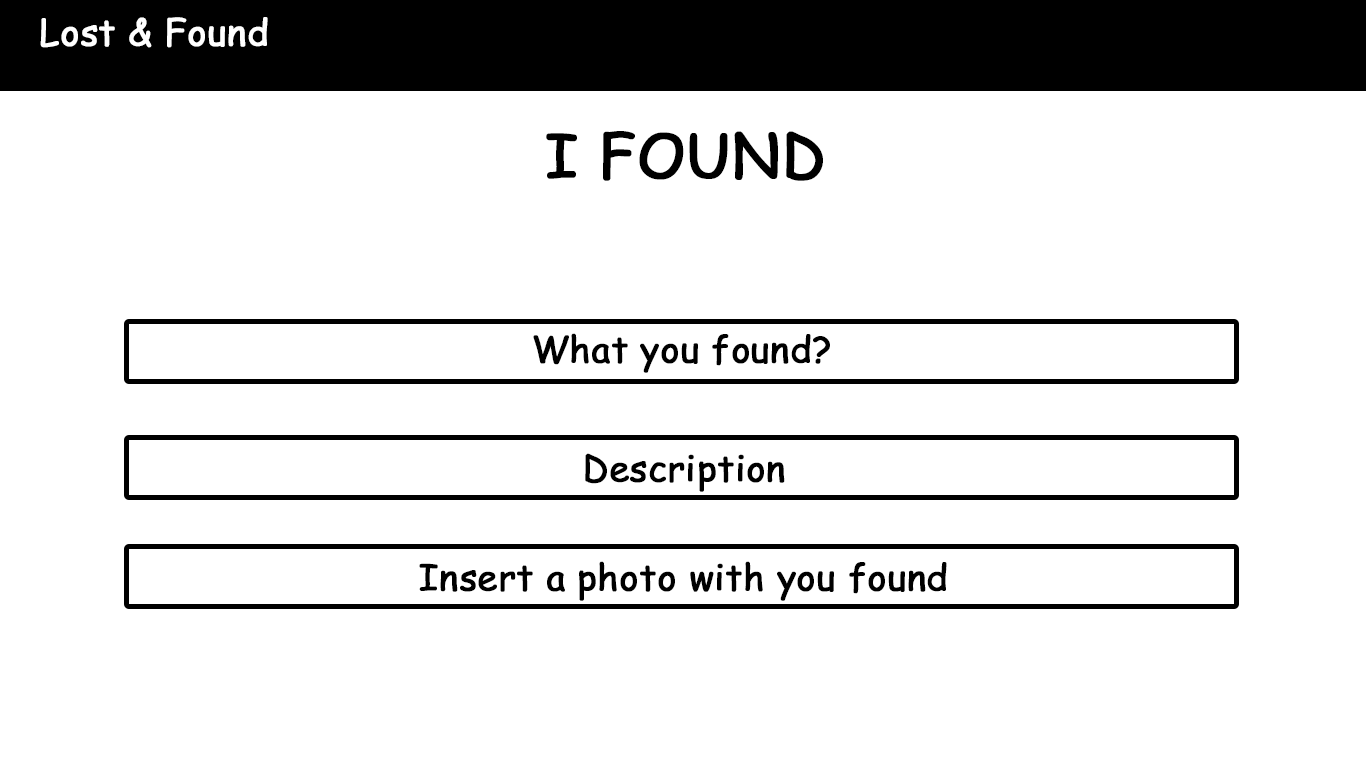
<style>
.page{position:relative;width:1366px;height:768px;background:#ffffff}
.page>*{position:absolute;margin:0}
.t1{font:36px "ComicSansMS";color:#ffffff;font-weight:bold}
.t2{font:60px "ComicSansMS";color:#000000;font-weight:bold}
.t3{font:36px "ComicSansMS";color:#000000;font-weight:bold}
</style>
<div class="page">
<p class="t1" style="left:40px;top:17px;width:228px;height:31px">Lost &amp; Found</p>
<p class="t2" style="left:546px;top:131px;width:277px;height:50px">I FOUND</p>
<p class="t3" style="left:533px;top:333px;width:297px;height:40px">What you found?</p>
<p class="t3" style="left:585px;top:453px;width:200px;height:39px">Description</p>
<p class="t3" style="left:419px;top:561px;width:528px;height:40px">Insert a photo with you found</p>
</div>
